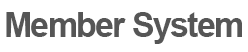
<style>
.page{position:relative;width:248px;height:52px;background:#ffffff}
.page>*{position:absolute;margin:0}
.t1{font:34px "Arial-BoldMT";letter-spacing:-0.05em;color:#565656}
</style>
<div class="page">
<p class="t1" style="left:6px;top:12px;width:236px;height:32px">Member System</p>
</div>
